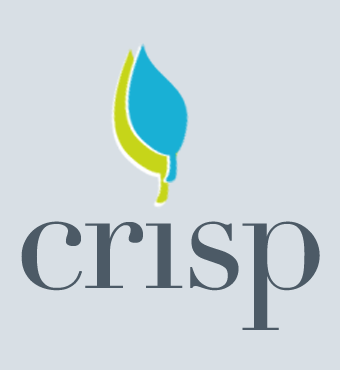
<style>
.page{position:relative;width:340px;height:370px;background:#d8dfe5}
.page>*{position:absolute;margin:0}
.t1{font:150px "Didot";letter-spacing:-0.02em;color:#4c5a66}
</style>
<div class="page">
<p class="t1" style="left:21px;top:180px;width:299px;height:150px">crisp</p>
</div>
